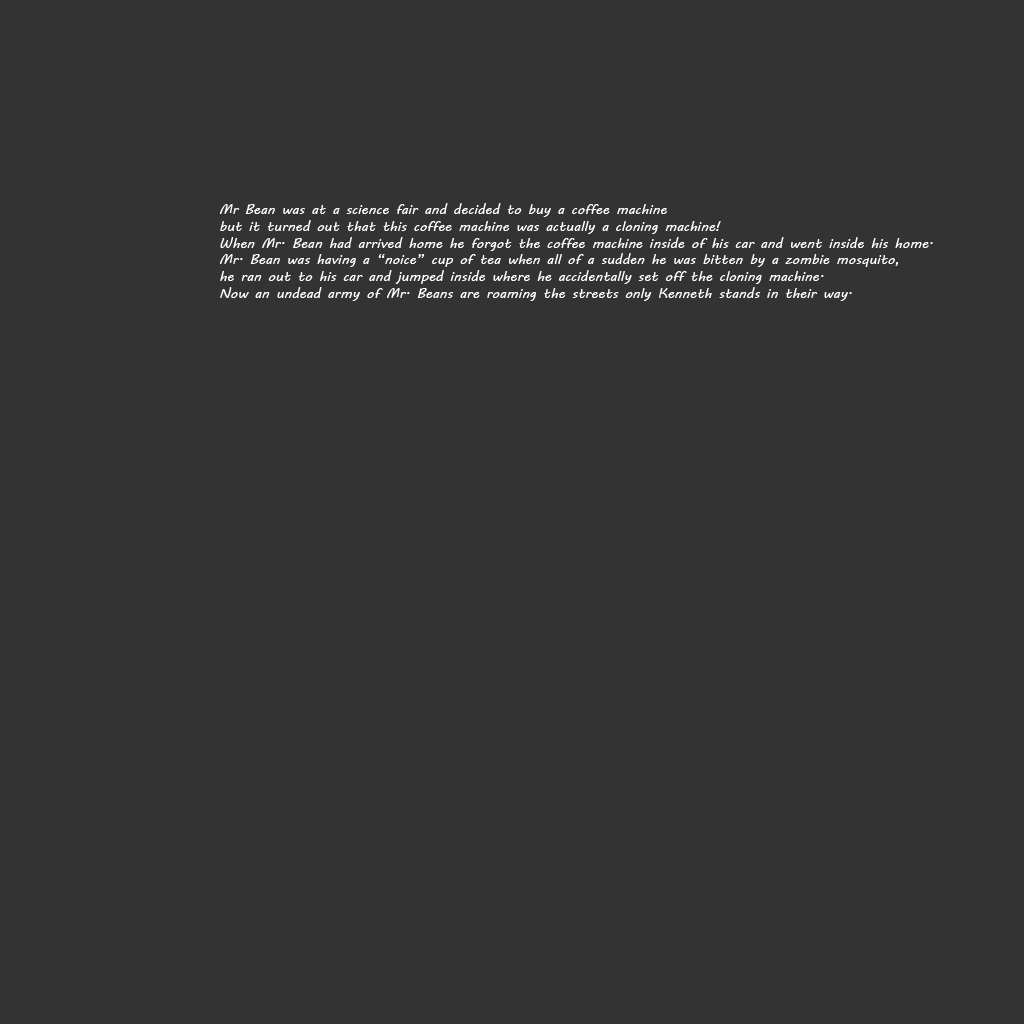
<style>
.page{position:relative;width:1024px;height:1024px;background:#333333}
.page>*{position:absolute;margin:0}
.t1{font:14px "MVBoli";color:#ffffff}
</style>
<div class="page">
<p class="t1" style="left:219px;top:203px;width:714px;height:98px">Mr Bean was at a science fair and decided to buy a coffee machine <br>but it turned out that this coffee machine was actually a cloning machine!<br>When Mr. Bean had arrived home he forgot the coffee machine inside of his car and went inside his home.<br>Mr. Bean was having a “noice” cup of tea when all of a sudden he was bitten by a zombie mosquito, <br>he ran out to his car and jumped inside where he accidentally set off the cloning machine. <br>Now an undead army of Mr. Beans are roaming the streets only Kenneth stands in their way.</p>
</div>
